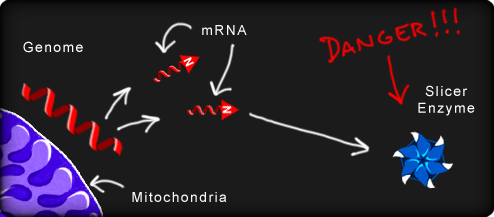
<style>
.page{position:relative;width:494px;height:217px;background:#1b1b1b}
.page>*{position:absolute;margin:0}
.t1{font:14px "ArialMT";letter-spacing:0.1em;color:#ffffff}
</style>
<div class="page">
<p class="t1" style="left:202px;top:25px;width:45px;height:10px">mRNA</p>
<p class="t1" style="left:23px;top:41px;width:60px;height:12px">Genome</p>
<p class="t1" style="left:418px;top:85px;width:57px;height:31px;text-align:center">Slicer<br>Enzyme</p>
<p class="t1" style="left:132px;top:192px;width:95px;height:10px">Mitochondria</p>
</div>
